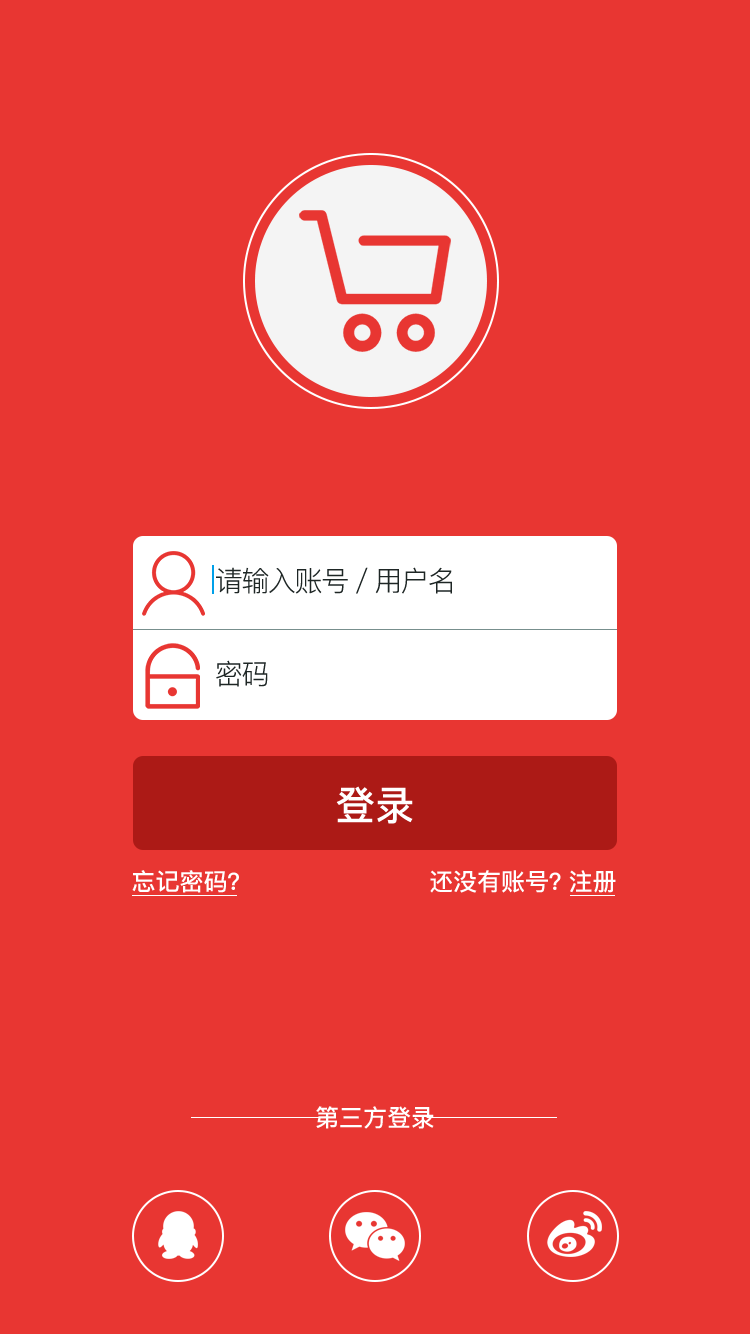
<style>
.page{position:relative;width:750px;height:1334px;background:#e83632}
.page>*{position:absolute;margin:0}
.t1{font:28.1px "PingFang-SC-Regular";letter-spacing:-0.05em;color:#1e2625}
.t2{font:40px "PingFang-SC-Bold";color:#ffffff}
.t3{font:24px "PingFang-SC-Bold";color:#ffffff}
.t4{font:24px "PingFang-SC-Bold";letter-spacing:-0.2em;color:#ffffff}
</style>
<div class="page">
<p class="t1" style="left:216px;top:567px;width:236px;height:27px">请输入账号/用户名</p>
<p class="t1" style="left:216px;top:660px;width:52px;height:27px">密码</p>
<p class="t2" style="left:336px;top:786px;width:77px;height:38px">登录</p>
<p class="t3" style="left:132px;top:870px;width:107px;height:23px">忘记密码？</p>
<p class="t3" style="left:430px;top:870px;width:186px;height:23px">还没有账号<span class="t4">？</span>注册</p>
<p class="t3" style="left:316px;top:1106px;width:118px;height:23px">第三方登录</p>
</div>
